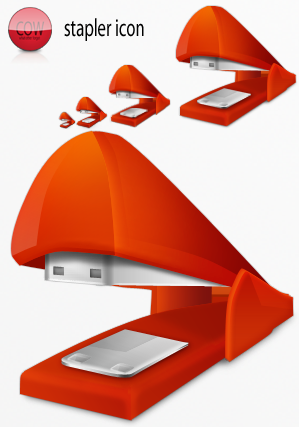
<style>
.page{position:relative;width:299px;height:427px}
.page>*{position:absolute;margin:0}
.t1{font:25px "MyriadPro-Regular";color:#000000;scale:0.67 1}
</style>
<div class="page">
<p class="t1" style="left:64px;top:18px;width:80px;height:23px">stapler icon</p>
</div>
